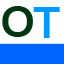
<style>
.page{position:relative;width:64px;height:64px;background:#ffffff}
.page>*{position:absolute;margin:0}
.t1{font:48px "Corbel-Bold";color:#023511}
.t2{font:48px "Corbel-Bold";color:#0099ff}
</style>
<div class="page">
<p class="t1" style="left:2px;top:6px;width:31px;height:31px">O</p>
<p class="t2" style="left:33px;top:7px;width:27px;height:31px">T</p>
</div>
